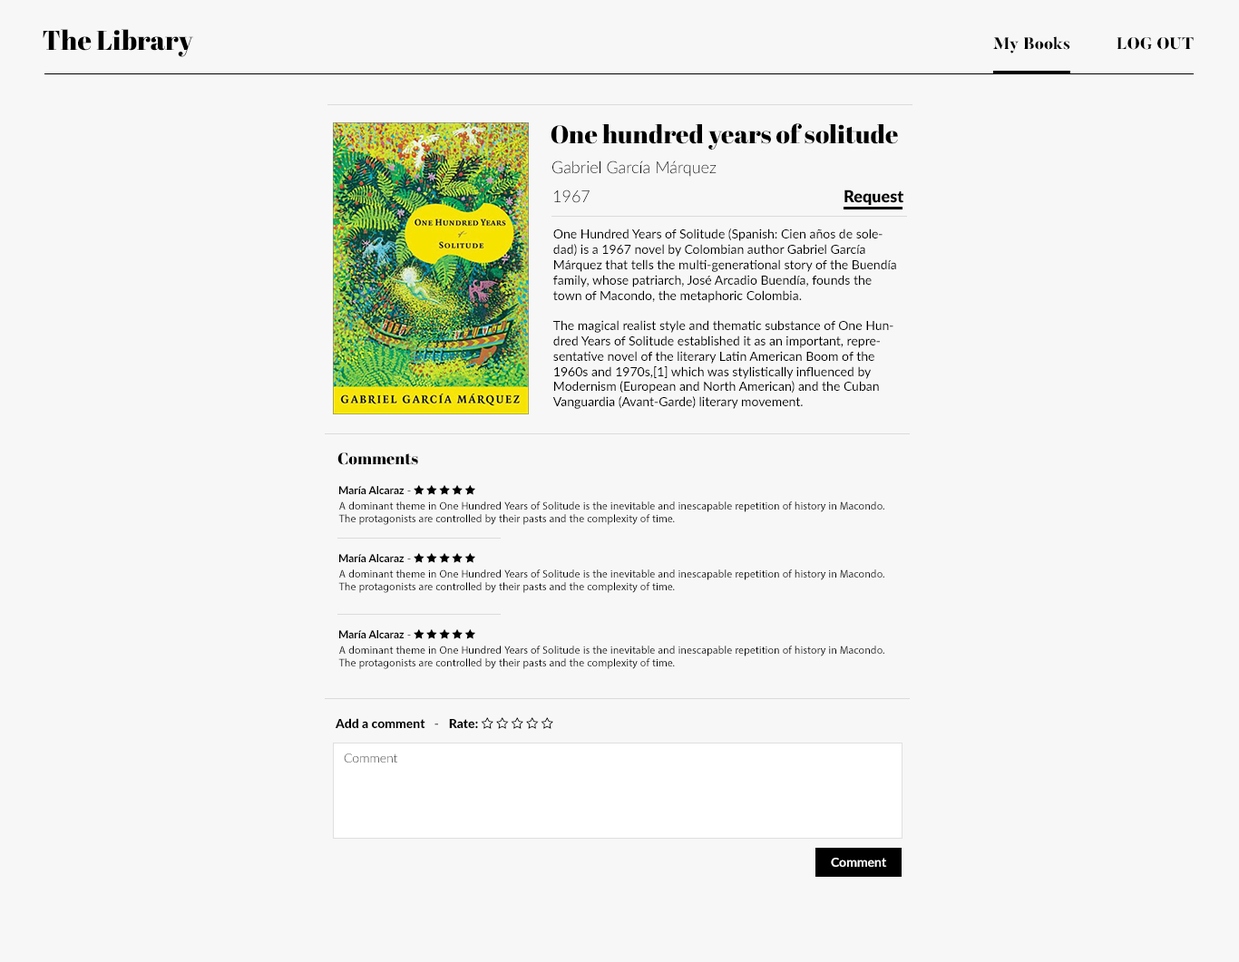
<style>
.page{position:relative;width:1239px;height:962px;background:#f7f7f7}
.page>*{position:absolute;margin:0}
.t1{font:27.2px "AbrilFatface-Regular";color:#000000}
.t2{font:16.3px "Butler-ExtraBold";color:#000000}
.t3{font:25.4px "AbrilFatface-Regular";color:#000000}
.t4{font:16.3px "Lato-Light";color:#000000}
.t5{font:16.3px "Lato-Light"}
.t6{font:16.3px "Lato-Black";color:#000000}
.t7{font:12.7px "Lato-Regular";color:#000000}
.t8{font:16.3px "AbrilFatface-Regular";color:#000000}
.t9{font:10.9px "MyriadPro-Regular";color:#000000}
.t10{font:12.7px "Lato-Light"}
.t11{font:12.7px "Lato-Bold";color:#ffffff}
</style>
<div class="page">
<p class="t1" style="left:43px;top:29px;width:150px;height:28px">The Library</p>
<p class="t2" style="left:993px;top:36px;width:77px;height:18px">My Books</p>
<p class="t2" style="left:1117px;top:37px;width:77px;height:13px">LOG OUT</p>
<p class="t3" style="left:551px;top:123px;width:347px;height:27px">One hundred years of solitude</p>
<p class="t4" style="left:552px;top:161px;width:165px;height:16px">Gabriel García Márquez</p>
<p class="t5" style="left:553px;top:190px;width:37px;height:13px">1967</p>
<p class="t6" style="left:844px;top:190px;width:60px;height:15px">Request</p>
<p class="t7" style="left:552px;top:229px;width:344px;height:180px">One Hundred Years of Solitude (Spanish: Cien años de soledad) is a 1967 novel by Colombian author Gabriel García Márquez that tells the multi-generational story of the Buendía family, whose patriarch, José Arcadio Buendía, founds the town of Macondo, the metaphoric Colombia.<br><br>The magical realist style and thematic substance of One Hundred Years of Solitude established it as an important, representative novel of the literary Latin American Boom of the 1960s and 1970s,[1] which was stylistically influenced by Modernism (European and North American) and the Cuban Vanguardia (Avant-Garde) literary movement.<br><br>One Hundred Years of Solitude was first published in Spanish in 1967; it has been translated into thirty-seven languages and has sold more than 30 million copies.[2][3][4] The novel remains widely acclaimed, and is considered García Márquez's masterpiece.</p>
<p class="t8" style="left:337px;top:453px;width:81px;height:12px">Comments</p>
<p class="t9" style="left:338px;top:502px;width:546px;height:23px">A dominant theme in One Hundred Years of Solitude is the inevitable and inescapable repetition of history in Macondo. The protagonists are controlled by their pasts and the complexity of time.</p>
<p class="t9" style="left:338px;top:570px;width:546px;height:23px">A dominant theme in One Hundred Years of Solitude is the inevitable and inescapable repetition of history in Macondo. The protagonists are controlled by their pasts and the complexity of time.</p>
<p class="t9" style="left:338px;top:646px;width:546px;height:23px">A dominant theme in One Hundred Years of Solitude is the inevitable and inescapable repetition of history in Macondo. The protagonists are controlled by their pasts and the complexity of time.</p>
<p class="t10" style="left:344px;top:754px;width:53px;height:9px">Comment</p>
<p class="t11" style="left:831px;top:858px;width:56px;height:9px">Comment</p>
</div>
